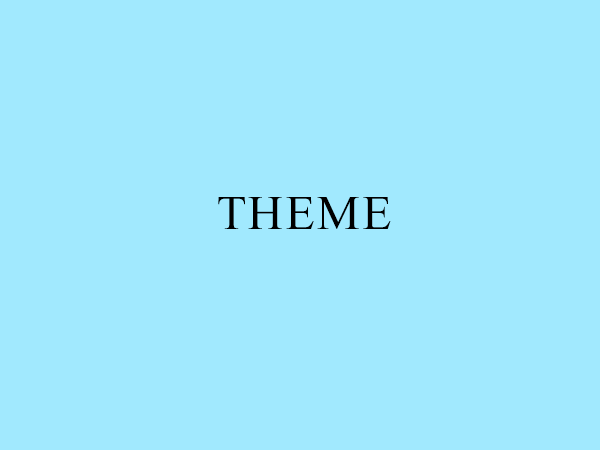
<style>
.page{position:relative;width:600px;height:450px;background:#a1e9fe}
.page>*{position:absolute;margin:0}
.t1{font:48px "TimesNewRomanPSMT";letter-spacing:0.05em;color:#000000;text-transform:uppercase}
</style>
<div class="page">
<p class="t1" style="left:218px;top:197px;width:173px;height:32px">THEME</p>
</div>
